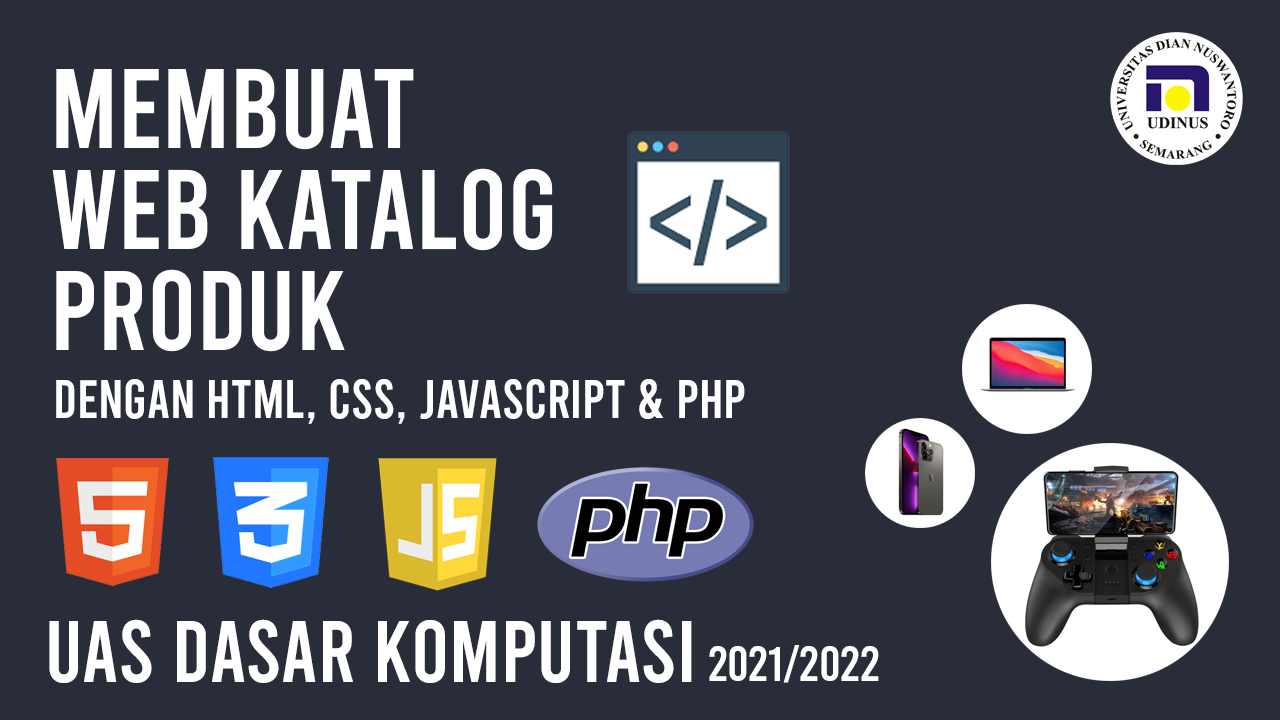
<style>
.page{position:relative;width:1280px;height:720px;background:#292c39}
.page>*{position:absolute;margin:0}
.t1{font:113.4px/50.4px "Bebas-Regular";color:#ffffff}
.t2{font:54px "Bebas-Regular";color:#ffffff}
.t3{font:87px "Bebas-Regular";color:#ffffff}
.t4{font:49px "Bebas-Regular";color:#ffffff}
</style>
<div class="page">
<p class="t1" style="left:52px;top:68px;width:501px;height:284px">membuat<br><br>web katalog <br><br>produk</p>
<p class="t2" style="left:56px;top:379px;width:689px;height:45px">dengan html, css, javascript &amp; php</p>
<p class="t3" style="left:49px;top:619px;width:643px;height:64px">uas dasar komputasi</p>
<p class="t4" style="left:709px;top:645px;width:170px;height:38px">2021/2022</p>
</div>
